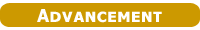
<style>
.page{position:relative;width:200px;height:30px;background:#cc9900}
.page>*{position:absolute;margin:0}
.t1{font:17.9px "TahomaSmallCap-Bold";color:#ffffff}
</style>
<div class="page">
<p class="t1" style="left:37px;top:9px;width:125px;height:14px">Advancement</p>
</div>
